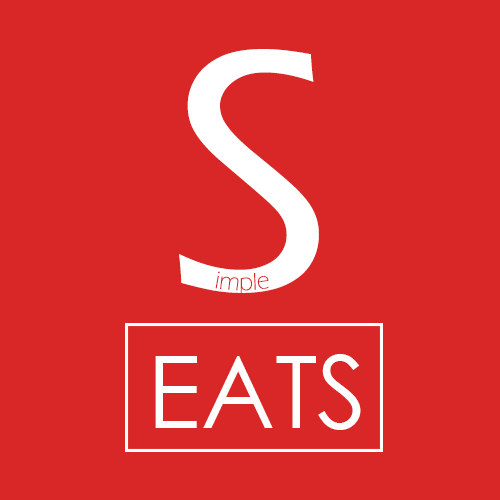
<style>
.page{position:relative;width:500px;height:500px;background:#d92727}
.page>*{position:absolute;margin:0}
.t1{font:354.2px "ErasITC-Medium";color:#ffffff}
.t2{font:25px "ErasITC-Light";color:#d92727}
.t3{font:100px "CenturyGothic";color:#ffffff}
</style>
<div class="page">
<p class="t1" style="left:179px;top:49px;width:140px;height:244px">S</p>
<p class="t2" style="left:215px;top:271px;width:54px;height:25px">imple</p>
<p class="t3" style="left:155px;top:354px;width:206px;height:76px">EATS</p>
</div>
